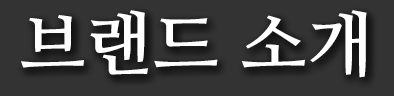
<style>
.page{position:relative;width:394px;height:96px;background:#333333}
.page>*{position:absolute;margin:0}
.t1{font:70px "NanumMyeongjoBold";color:#ffffff}
</style>
<div class="page">
<p class="t1" style="left:21px;top:10px;width:346px;height:68px">브랜드 소개</p>
</div>
